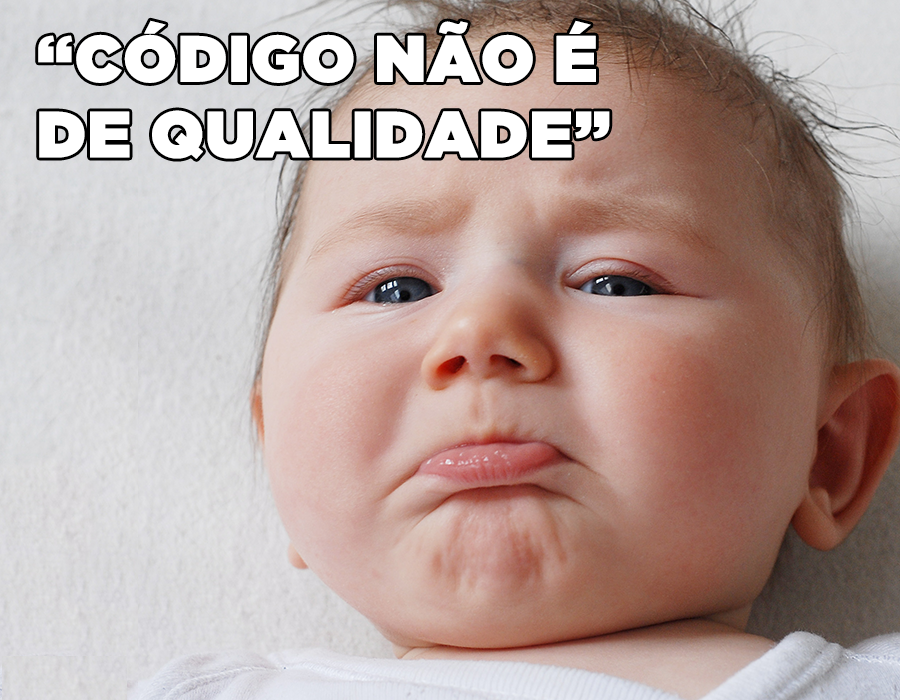
<style>
.page{position:relative;width:900px;height:700px}
.page>*{position:absolute;margin:0}
.t1{font:65px/75.7px "GothamUltra";color:#ffffff;font-weight:bold}
</style>
<div class="page">
<p class="t1" style="left:38px;top:20px;width:572px;height:139px">“CÓDIGO NÃO É<br>DE QUALIDADE”</p>
</div>
